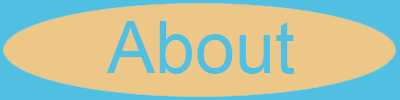
<style>
.page{position:relative;width:400px;height:100px;background:#edc787}
.page>*{position:absolute;margin:0}
.t1{font:72px "ArialMT";color:#51bfe2}
</style>
<div class="page">
<p class="t1" style="left:106px;top:21px;width:189px;height:53px">About</p>
</div>
